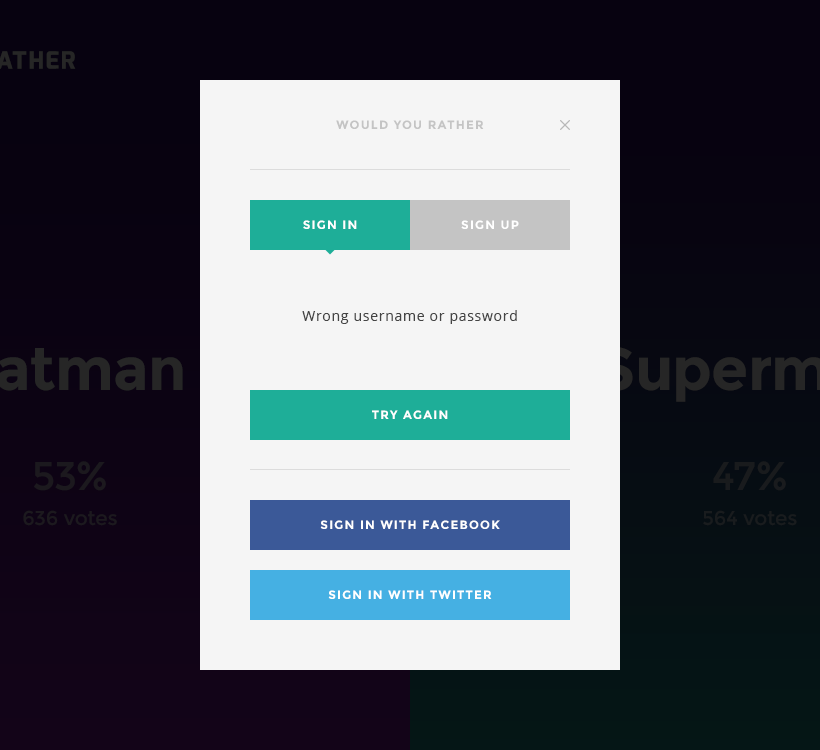
<style>
.page{position:relative;width:820px;height:750px;background:#f5f5f5}
.page>*{position:absolute;margin:0}
.t1{font:12px "Montserrat-Bold";letter-spacing:0.1em;color:#c4c4c4;text-transform:uppercase}
.t2{font:12px "Montserrat-Bold";letter-spacing:0.1em;color:#ffffff;text-transform:uppercase}
.t3{font:14px "OpenSans";letter-spacing:0.05em;color:#444444}
</style>
<div class="page">
<p class="t1" style="left:336px;top:120px;width:148px;height:9px">WOULD YOU RATHER</p>
<p class="t2" style="left:303px;top:220px;width:54px;height:9px">SIGN IN</p>
<p class="t2" style="left:461px;top:220px;width:58px;height:9px">SIGN UP</p>
<p class="t3" style="left:302px;top:310px;width:215px;height:14px">Wrong username or password</p>
<p class="t2" style="left:372px;top:410px;width:76px;height:9px">TRY AGAIN</p>
<p class="t2" style="left:320px;top:520px;width:180px;height:9px">SIGN IN WITH FACEBOOK</p>
<p class="t2" style="left:328px;top:590px;width:164px;height:9px">SIGN IN WITH TWITTER</p>
</div>
